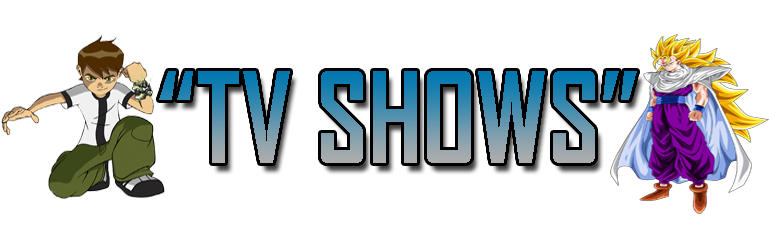
<style>
.page{position:relative;width:769px;height:250px;background:#ffffff}
.page>*{position:absolute;margin:0}
.t1{font:120.1px "AgencyFB-Bold";scale:0.95 1}
</style>
<div class="page">
<p class="t1" style="left:159px;top:71px;width:478px;height:92px">“TV SHOWS”</p>
</div>
